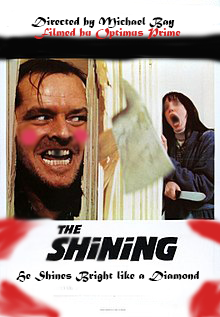
<style>
.page{position:relative;width:220px;height:317px}
.page>*{position:absolute;margin:0}
.t1{font:12px "MaturaMTScriptCapitals";color:#000000}
.t2{font:12px "MaturaMTScriptCapitals";color:#d32424}
</style>
<div class="page">
<p class="t1" style="left:31px;top:17px;width:144px;height:12px">Directed by Michael Bay</p>
<p class="t2" style="left:34px;top:28px;width:147px;height:11px">Filmed bu Optimus Prime</p>
<p class="t1" style="left:16px;top:271px;width:183px;height:12px">He Shines Bright like a Diamond</p>
</div>
